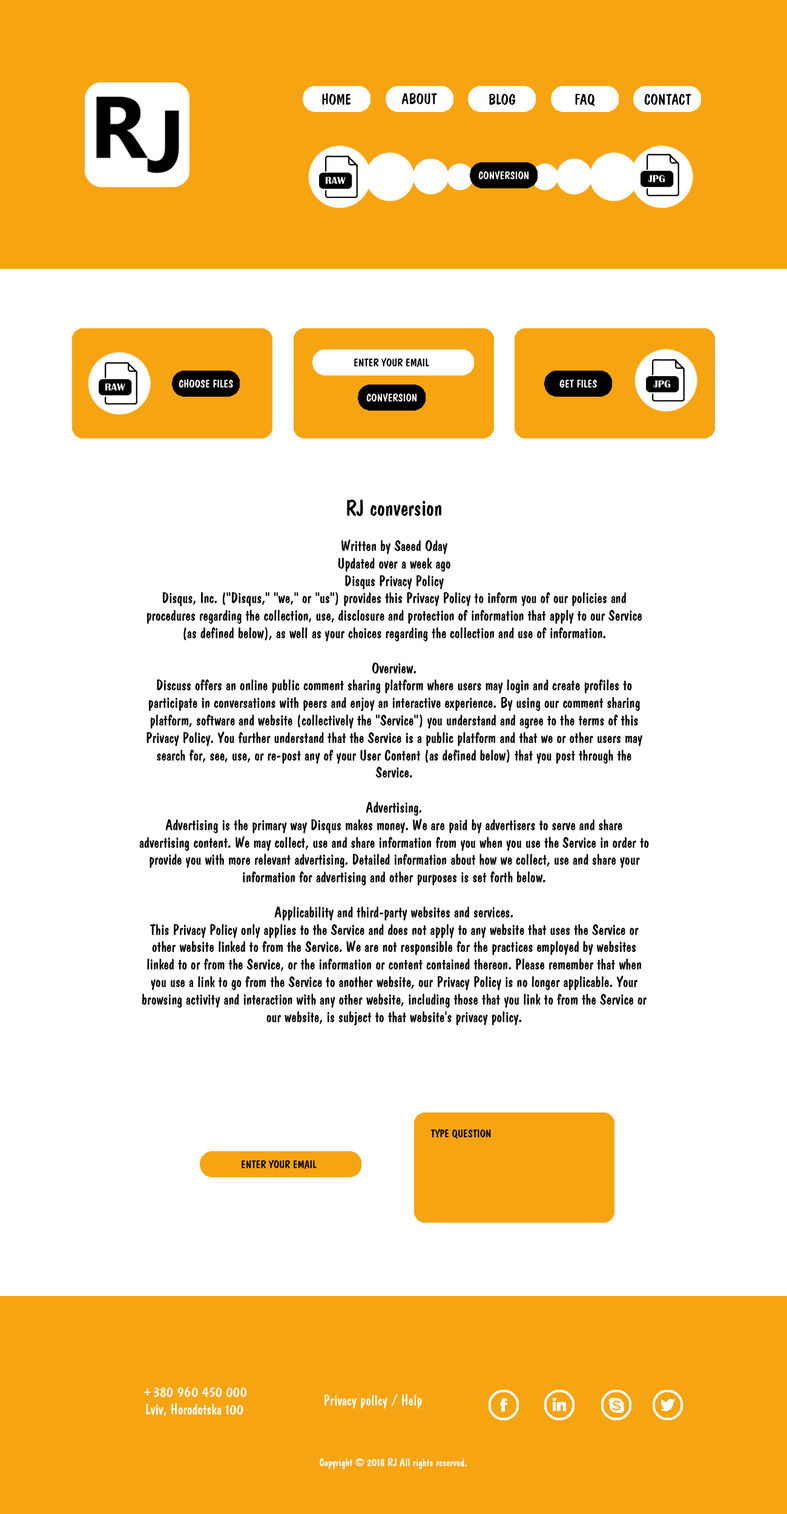
<style>
.page{position:relative;width:787px;height:1514px;background:#ffffff}
.page>*{position:absolute;margin:0}
.t1{font:14.5px "ADomIno";color:#000000}
.t2{font:10.9px "ADomIno";color:#ffffff}
.t3{font:10.9px "ADomIno";color:#000000}
.t4{font:21.8px "ADomIno";color:#000000}
.t5{font:14.5px "ADomIno";color:#ffffff}
</style>
<div class="page">
<p class="t1" style="left:322px;top:93px;width:29px;height:12px">HOME</p>
<p class="t1" style="left:402px;top:93px;width:35px;height:11px">ABOUT</p>
<p class="t1" style="left:489px;top:94px;width:27px;height:11px">BLOG</p>
<p class="t1" style="left:575px;top:94px;width:20px;height:12px">FAQ</p>
<p class="t1" style="left:644px;top:94px;width:48px;height:11px">CONTACT</p>
<p class="t2" style="left:479px;top:171px;width:50px;height:8px">CONVERSION</p>
<p class="t3" style="left:354px;top:358px;width:75px;height:9px">ENTER YOUR EMAIL</p>
<p class="t2" style="left:179px;top:379px;width:54px;height:9px">CHOOSE FILES</p>
<p class="t2" style="left:560px;top:380px;width:37px;height:8px">GET FILES</p>
<p class="t2" style="left:366px;top:393px;width:51px;height:9px">CONVERSION</p>
<p class="t1" style="left:139px;top:500px;width:510px;height:525px;text-align:center"><span class="t4">RJ conversion<br></span><br>Written by Saeed Oday <br>Updated over a week ago<br>Disqus Privacy Policy<br>Disqus, Inc. ("Disqus," "we," or "us") provides this Privacy Policy to inform you of our policies and procedures regarding the collection, use, disclosure and protection of information that apply to our Service (as defined below), as well as your choices regarding the collection and use of information.<br><br>Overview.<br>Discuss offers an online public comment sharing platform where users may login and create profiles to participate in conversations with peers and enjoy an interactive experience. By using our comment sharing platform, software and website (collectively the "Service") you understand and agree to the terms of this Privacy Policy. You further understand that the Service is a public platform and that we or other users may search for, see, use, or re-post any of your User Content (as defined below) that you post through the Service.<br><br>Advertising.<br>Advertising is the primary way Disqus makes money. We are paid by advertisers to serve and share advertising content. We may collect, use and share information from you when you use the Service in order to provide you with more relevant advertising. Detailed information about how we collect, use and share your information for advertising and other purposes is set forth below.<br><br>Applicability and third-party websites and services.<br>This Privacy Policy only applies to the Service and does not apply to any website that uses the Service or other website linked to from the Service. We are not responsible for the practices employed by websites linked to or from the Service, or the information or content contained thereon. Please remember that when you use a link to go from the Service to another website, our Privacy Policy is no longer applicable. Your browsing activity and interaction with any other website, including those that you link to from the Service or our website, is subject to that website's privacy policy.</p>
<p class="t3" style="left:431px;top:1129px;width:60px;height:10px">TYPE QUESTION</p>
<p class="t3" style="left:242px;top:1160px;width:75px;height:9px">ENTER YOUR EMAIL</p>
<p class="t5" style="left:144px;top:1387px;width:103px;height:30px;text-align:center">+380 960 450 000<br>Lviv, Horodotska 100</p>
<p class="t5" style="left:325px;top:1394px;width:97px;height:15px">Privacy policy / Help</p>
<p class="t2" style="left:320px;top:1459px;width:147px;height:10px">Copyright © 2018 RJ All rights reserved.</p>
</div>
